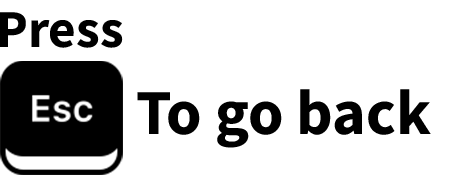
<style>
.page{position:relative;width:456px;height:188px;background:#ffffff}
.page>*{position:absolute;margin:0}
.t1{font:53.3px "SourceSansPro-Bold";color:#000000}
.t2{font:64px "SourceSansPro-Bold";color:#000000}
</style>
<div class="page">
<p class="t1" style="left:0px;top:12px;width:123px;height:36px">Press</p>
<p class="t2" style="left:137px;top:89px;width:294px;height:59px">To go back</p>
</div>
